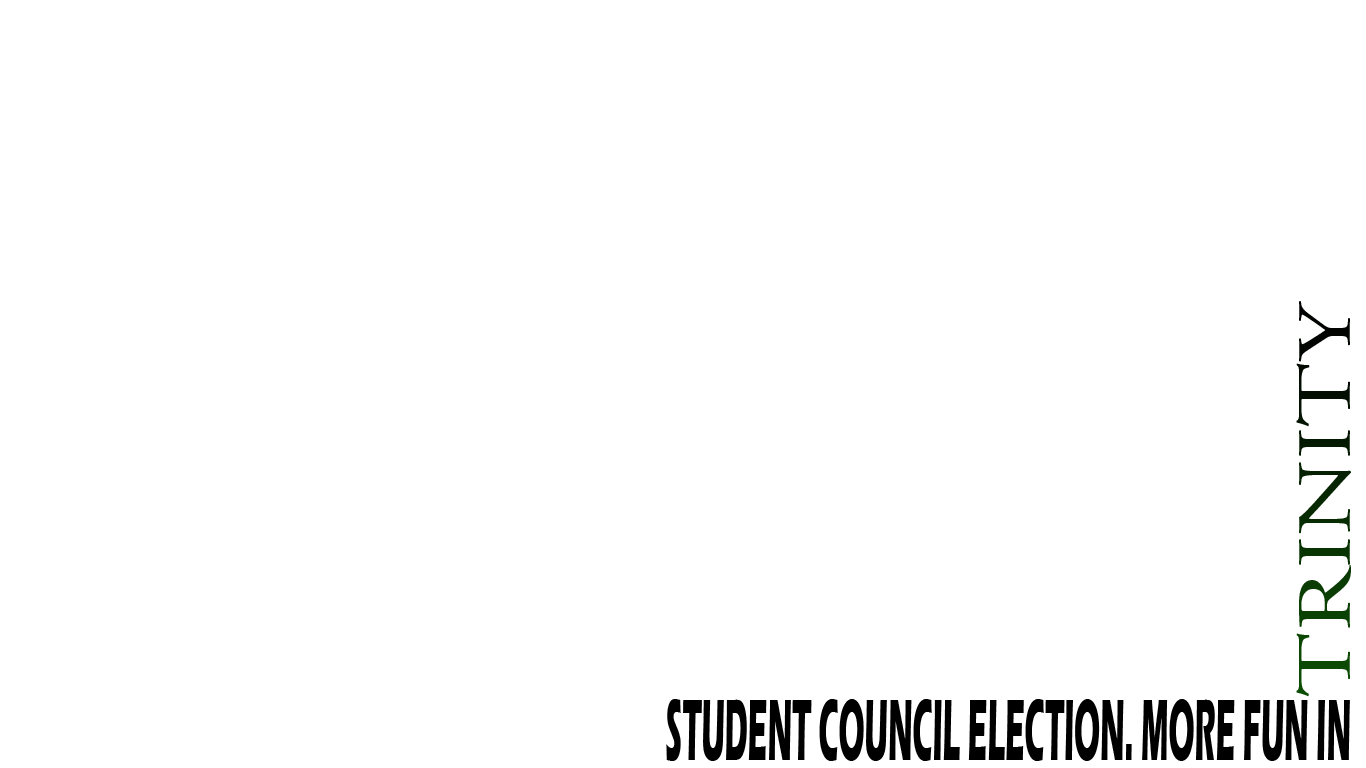
<style>
.page{position:relative;width:1366px;height:768px;background:#ffffff}
.page>*{position:absolute;margin:0}
.t1{font:77.7px "AGaramondPro-Regular";scale:1.26 1}
.t2{font:90px "ErasITC-Bold";color:#000000;scale:0.33 1}
</style>
<div class="page">
<p class="t1" style="left:1296px;top:301px;width:55px;height:396px;rotate:-90deg">TRINITY</p>
<p class="t2" style="left:666px;top:699px;width:684px;height:62px">STUDENT COUNCIL ELECTION. MORE FUN IN</p>
</div>
